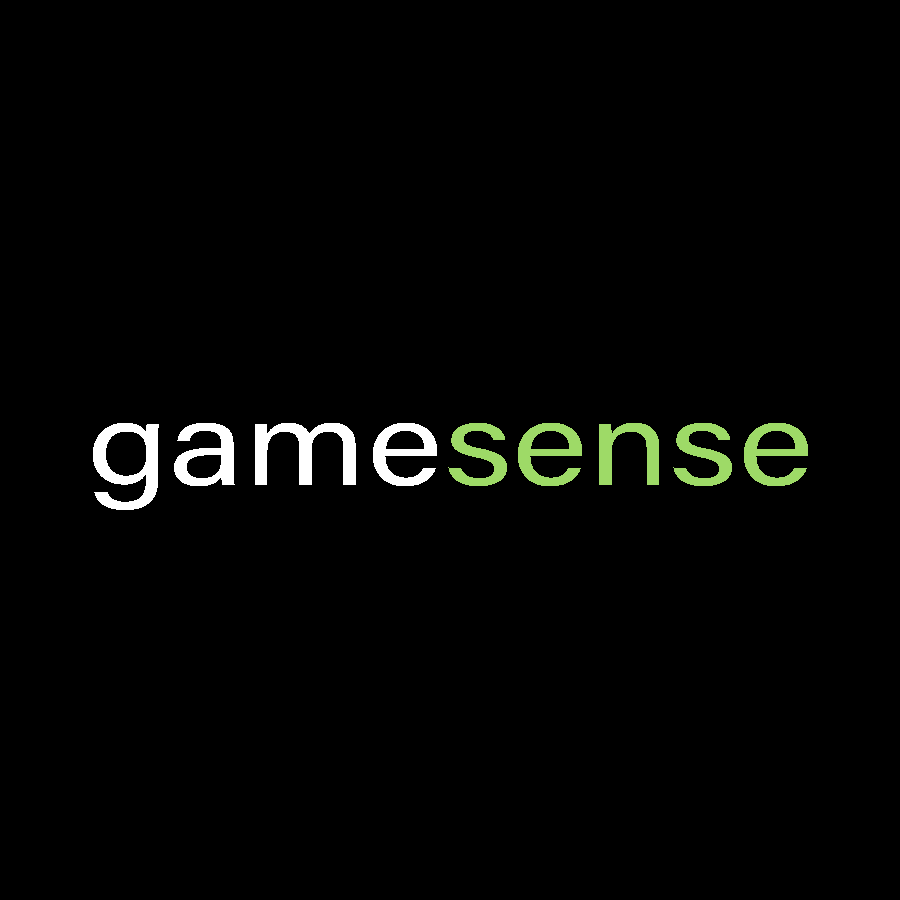
<style>
.page{position:relative;width:900px;height:900px;background:#000000}
.page>*{position:absolute;margin:0}
.t1{font:120.2px "AcuminConcept-Regular";color:#9eda67;scale:1.2 1}
.t2{font:120.2px "AcuminConcept-Regular";color:#ffffff;scale:1.2 1}
</style>
<div class="page">
<p class="t1" style="left:93px;top:423px;width:715px;height:87px"><span class="t2">game</span>sense</p>
</div>
